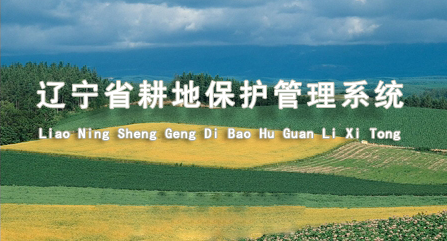
<style>
.page{position:relative;width:447px;height:241px}
.page>*{position:absolute;margin:0}
.t1{font:30px "SimHei";letter-spacing:0.1em;color:#ffffff;font-weight:bold}
.t2{font:14px "SimHei";letter-spacing:0.035em;color:#ffffff;font-weight:bold}
</style>
<div class="page">
<p class="t1" style="left:37px;top:80px;width:366px;height:29px">辽宁省耕地保护管理系统</p>
<p class="t2" style="left:39px;top:128px;width:361px;height:12px">Liao Ning Sheng Geng Di Bao Hu Guan Li Xi Tong</p>
</div>
